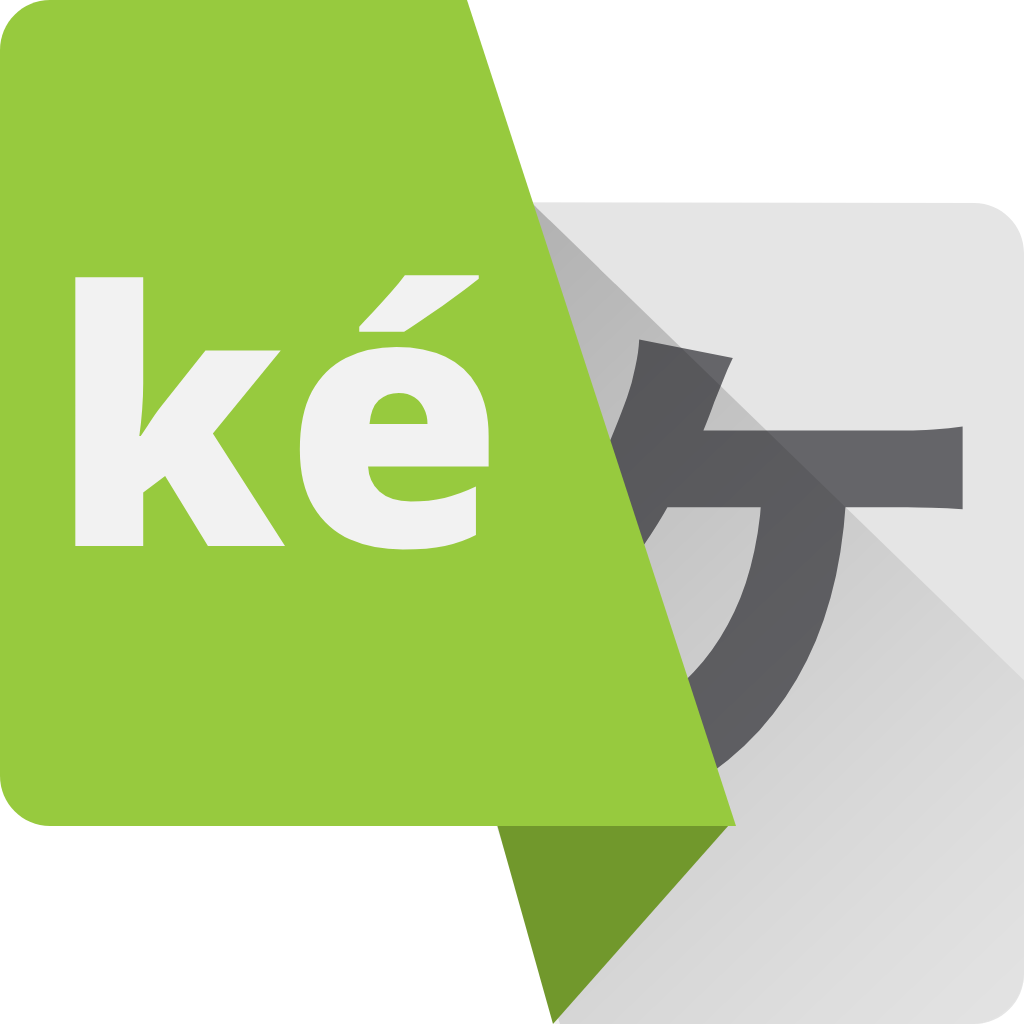
<style>
.page{position:relative;width:1024px;height:1024px;background:#97ca3e}
.page>*{position:absolute;margin:0}
.t1{font:353.6px "NotoSans-Black";color:#f2f2f2}
.t2{font:500.7px "NotoSansJP-Black";color:#656569}
</style>
<div class="page">
<p class="t1" style="left:75px;top:275px;width:414px;height:275px">ké</p>
<p class="t2" style="left:512px;top:339px;width:451px;height:447px">ケ</p>
</div>
